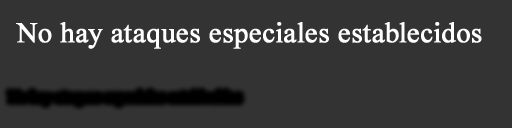
<style>
.page{position:relative;width:512px;height:128px;background:#333333}
.page>*{position:absolute;margin:0}
.t1{font:28.8px "TimesNewRomanPSMT";color:#ffffff;font-weight:bold}
.t2{font:13.7px "TimesNewRomanPSMT";color:#000000;font-weight:bold;scale:1.04 1}
</style>
<div class="page">
<p class="t1" style="left:16px;top:22px;width:466px;height:27px">No hay ataques especiales establecidos</p>
<p class="t2" style="left:8px;top:91px;width:233px;height:14px">No hay ataques especiales establecidos</p>
</div>
